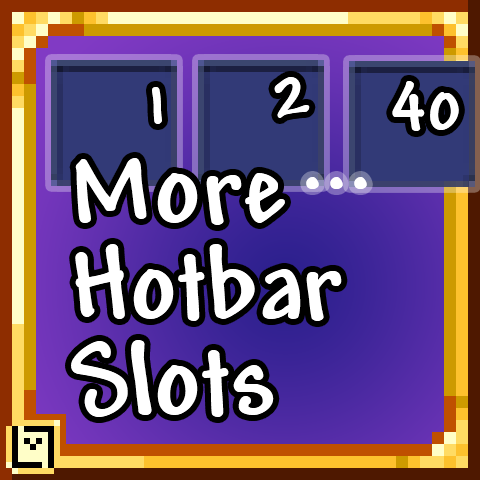
<style>
.page{position:relative;width:480px;height:480px}
.page>*{position:absolute;margin:0}
.t1{font:72px "Andy-Bold";color:#ffffff}
.t2{font:108px/96px "Andy-Bold";color:#ffffff}
.t3{font:108px "Andy-Bold";color:#ffffff}
</style>
<div class="page">
<p class="t1" style="left:274px;top:77px;width:36px;height:41px">2</p>
<p class="t1" style="left:152px;top:87px;width:10px;height:37px">1</p>
<p class="t1" style="left:392px;top:81px;width:67px;height:50px">40</p>
<p class="t2" style="left:71px;top:158px;width:271px;height:259px">More<br>Hotbar<br>Slots</p>
<p class="t3" style="left:306px;top:177px;width:61px;height:12px">...</p>
</div>
